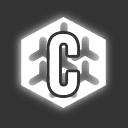
<style>
.page{position:relative;width:128px;height:128px;background:#333333}
.page>*{position:absolute;margin:0}
.t1{font:84.9px "BebasNeuePro-Bold";color:#ffffff}
</style>
<div class="page">
<p class="t1" style="left:49px;top:34px;width:28px;height:61px">C</p>
</div>
